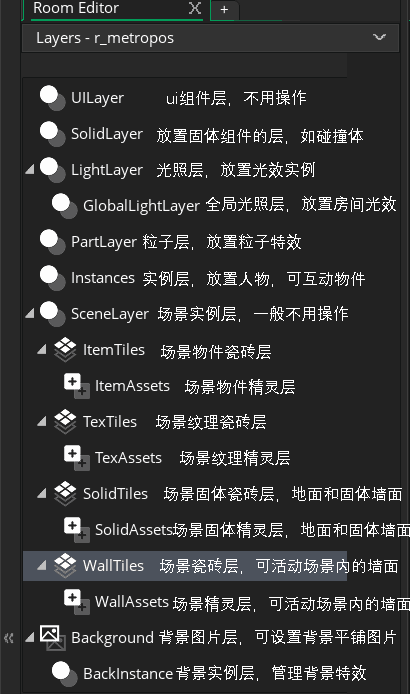
<style>
.page{position:relative;width:410px;height:694px;background:#222222}
.page>*{position:absolute;margin:0}
.t1{font:16px "DengXian";color:#ffffff}
</style>
<div class="page">
<p class="t1" style="left:167px;top:90px;width:139px;height:16px">ui组件层，不用操作</p>
<p class="t1" style="left:157px;top:128px;width:206px;height:16px">放置固体组件的层，如碰撞体</p>
<p class="t1" style="left:157px;top:162px;width:158px;height:16px">光照层，放置光效实例</p>
<p class="t1" style="left:206px;top:196px;width:190px;height:16px">全局光照层，放置房间光效</p>
<p class="t1" style="left:143px;top:234px;width:158px;height:16px">粒子层，放置粒子特效</p>
<p class="t1" style="left:143px;top:271px;width:222px;height:16px">实例层，放置人物，可互动物件</p>
<p class="t1" style="left:158px;top:306px;width:190px;height:16px">场景实例层，一般不用操作</p>
<p class="t1" style="left:161px;top:344px;width:110px;height:15px">场景物件瓷砖层</p>
<p class="t1" style="left:185px;top:379px;width:110px;height:16px">场景物件精灵层</p>
<p class="t1" style="left:156px;top:414px;width:110px;height:16px">场景纹理瓷砖层</p>
<p class="t1" style="left:180px;top:450px;width:110px;height:16px">场景纹理精灵层</p>
<p class="t1" style="left:164px;top:486px;width:238px;height:16px">场景固体瓷砖层，地面和固体墙面</p>
<p class="t1" style="left:173px;top:522px;width:238px;height:16px">场景固体精灵层，地面和固体墙面</p>
<p class="t1" style="left:160px;top:558px;width:238px;height:16px">场景瓷砖层，可活动场景内的墙面</p>
<p class="t1" style="left:173px;top:596px;width:238px;height:16px">场景精灵层，可活动场景内的墙面</p>
<p class="t1" style="left:159px;top:630px;width:237px;height:15px">背景图片层，可设置背景平铺图片</p>
<p class="t1" style="left:176px;top:665px;width:190px;height:16px">背景实例层，管理背景特效</p>
</div>
